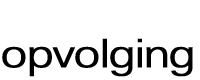
<style>
.page{position:relative;width:200px;height:80px;background:#ffffff}
.page>*{position:absolute;margin:0}
.t1{font:38.4px/32px "Kalinga";letter-spacing:-0.05em;color:#000000;font-weight:bold;scale:1.13 1}
.t2{font:38.4px/32px "Kalinga";letter-spacing:-0.05em;color:#ffffff;scale:1.13 1}
</style>
<div class="page">
<p class="t1" style="left:2px;top:6px;width:191px;height:71px;text-align:center"><span class="t2">dieet<br></span>opvolging</p>
</div>
